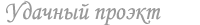
<style>
.page{position:relative;width:200px;height:25px;background:#ffffff}
.page>*{position:absolute;margin:0}
.t1{font:26.2px "MonotypeCorsiva";color:#999999;scale:0.92 1}
</style>
<div class="page">
<p class="t1" style="left:6px;top:0px;width:155px;height:26px">Удачный проэкт</p>
</div>
